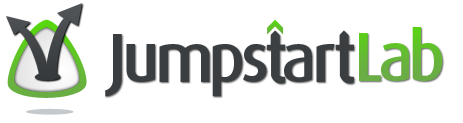
<style>
.page{position:relative;width:463px;height:123px;background:#ffffff}
.page>*{position:absolute;margin:0}
.t1{font:68.8px "Dax-Medium";letter-spacing:-0.075em;color:#66b539}
.t2{font:68.8px "Dax-Medium";letter-spacing:-0.075em;color:#3b3e40}
.t3{font:68.8px "Dax-Medium";letter-spacing:-0.04em;color:#3b3e40}
</style>
<div class="page">
<p class="t1" style="left:359px;top:27px;width:84px;height:54px">Lab</p>
<p class="t2" style="left:105px;top:34px;width:230px;height:63px">Jumps  a<span class="t3">r</span></p>
</div>
